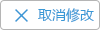
<style>
.page{position:relative;width:100px;height:30px;background:#ffffff}
.page>*{position:absolute;margin:0}
.t1{font:20px "AdobeHeitiStd-Regular";color:#3998d6}
.t2{font:14px "MicrosoftYaHei";color:#3998d6}
</style>
<div class="page">
<p class="t1" style="left:15px;top:9px;width:13px;height:13px">×</p>
<p class="t2" style="left:38px;top:8px;width:56px;height:15px">取消修改</p>
</div>
